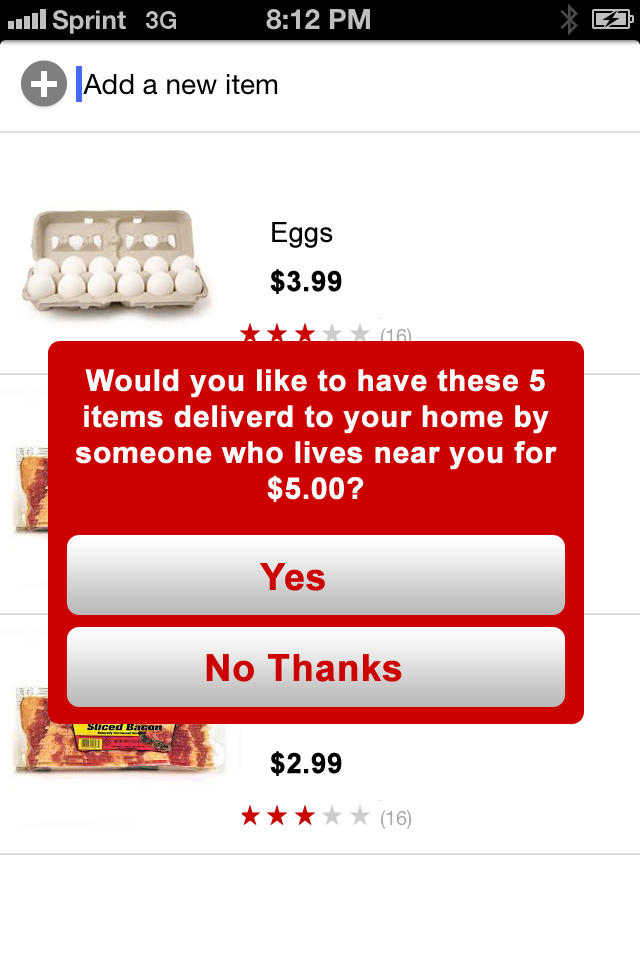
<style>
.page{position:relative;width:640px;height:960px;background:#ffffff}
.page>*{position:absolute;margin:0}
.t1{font:27.7px "ArialMT";color:#000000}
.t2{font:25.7px "Arial-BoldMT";color:#cc0000}
.t3{font:27.7px "Arial-BoldMT";color:#010000;font-weight:bold}
.t4{font:30px "Arial-BoldMT";color:#fefefe;font-weight:bold}
.t5{font:37.3px "Arial-BoldMT";color:#cc0000;font-weight:bold}
</style>
<div class="page">
<p class="t1" style="left:272px;top:222px;width:61px;height:26px"><span class="t2"><br><br></span>Eggs</p>
<p class="t3" style="left:270px;top:269px;width:72px;height:25px">$3.99</p>
<p class="t4" style="left:75px;top:369px;width:482px;height:133px;text-align:center">Would you like to have these 5 items deliverd to your home by someone who lives near you for $5.00?</p>
<p class="t5" style="left:260px;top:563px;width:65px;height:28px">Yes</p>
<p class="t5" style="left:206px;top:654px;width:196px;height:28px">No Thanks</p>
<p class="t3" style="left:270px;top:751px;width:72px;height:25px">$2.99</p>
</div>
